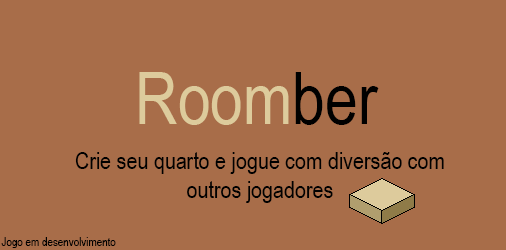
<style>
.page{position:relative;width:506px;height:250px;background:#a86d49}
.page>*{position:absolute;margin:0}
.t1{font:72px "ArialNarrow";color:#ddcb9c}
.t2{font:72px "ArialNarrow";color:#000000}
.t3{font:24px "ArialNarrow";color:#000000}
.t4{font:12px "ArialNarrow";color:#000000}
</style>
<div class="page">
<p class="t1" style="left:139px;top:72px;width:150px;height:53px">Room</p>
<p class="t2" style="left:295px;top:72px;width:84px;height:53px">ber</p>
<p class="t3" style="left:75px;top:152px;width:369px;height:51px;text-align:center">Crie seu quarto e jogue com diversão com outros jogadores</p>
<p class="t4" style="left:1px;top:237px;width:115px;height:11px">Jogo em desenvolvimento</p>
</div>
